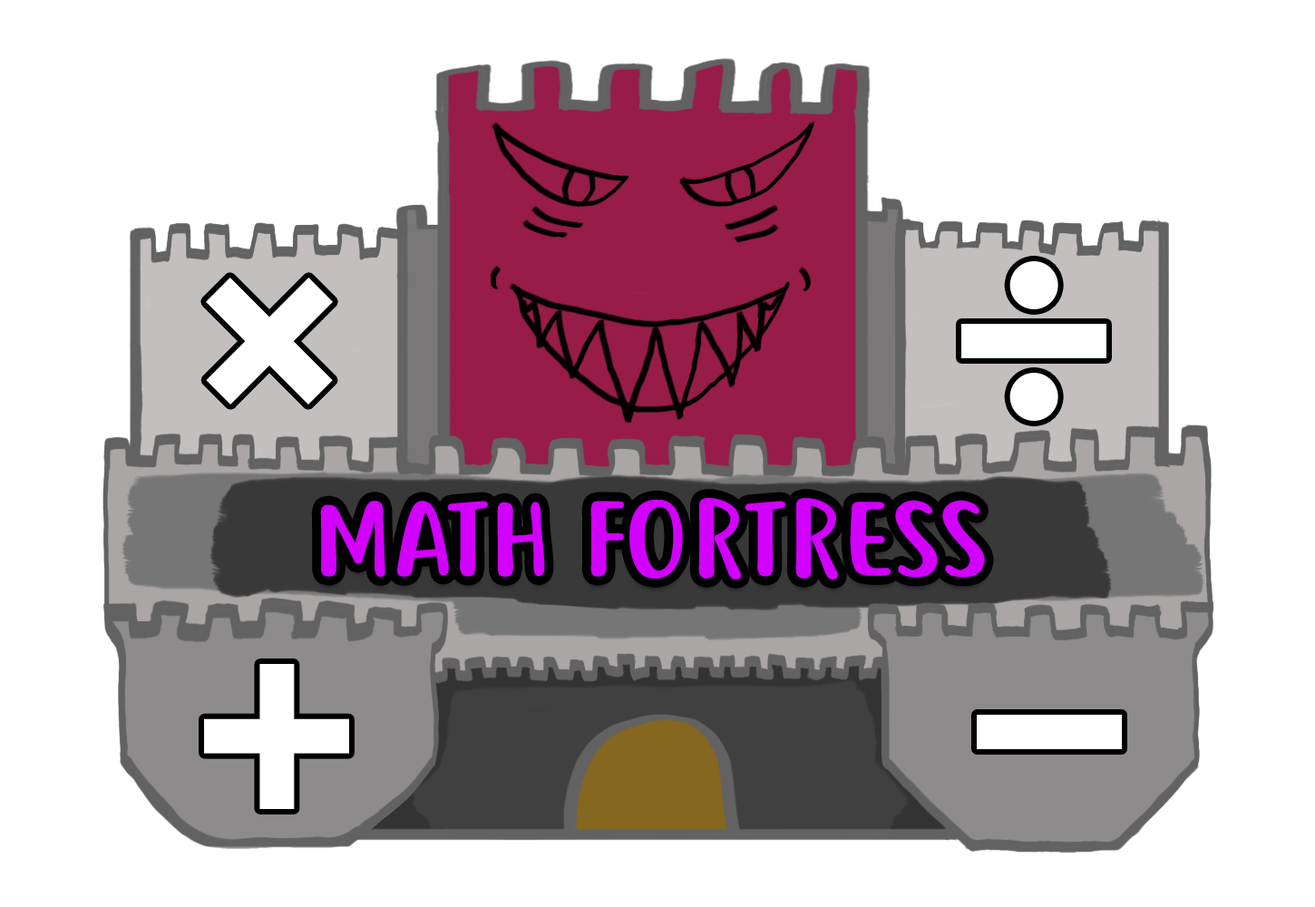
<style>
.page{position:relative;width:1315px;height:907px;background:#ffffff}
.page>*{position:absolute;margin:0}
.t1{font:100.8px "Justtellmewhat";color:#d200ff;scale:1.18 1}
</style>
<div class="page">
<p class="t1" style="left:320px;top:498px;width:665px;height:81px">MATH FORTRESS</p>
</div>
